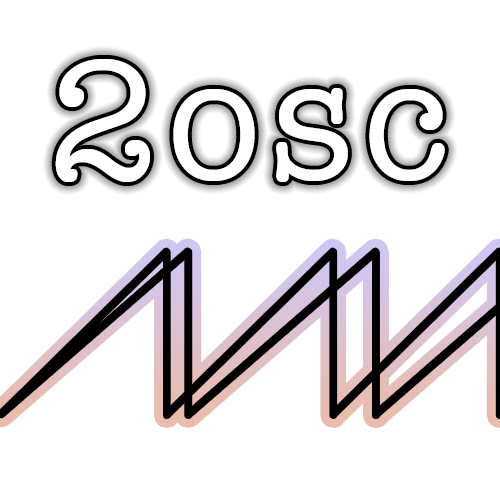
<style>
.page{position:relative;width:500px;height:500px;background:#ffffff}
.page>*{position:absolute;margin:0}
.t1{font:172.4px "AmericanTypewriter";letter-spacing:0.05em;color:#ffffff}
</style>
<div class="page">
<p class="t1" style="left:55px;top:59px;width:390px;height:123px">2osc</p>
</div>
